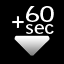
<style>
.page{position:relative;width:64px;height:64px;background:#000000}
.page>*{position:absolute;margin:0}
.t1{font:20.6px "BellGothicStd-Bold";letter-spacing:-0.02em;color:#ffffff;scale:1.32 1}
.t2{font:23.1px "BellGothicStd-Bold";letter-spacing:-0.02em;color:#ffffff}
.t3{font:18px "BellGothicStd-Bold";letter-spacing:-0.02em;color:#ffffff;scale:1.27 1}
</style>
<div class="page">
<p class="t1" style="left:26px;top:6px;width:28px;height:16px">60</p>
<p class="t2" style="left:12px;top:16px;width:12px;height:12px">+</p>
<p class="t3" style="left:26px;top:24px;width:28px;height:10px">sec</p>
</div>
